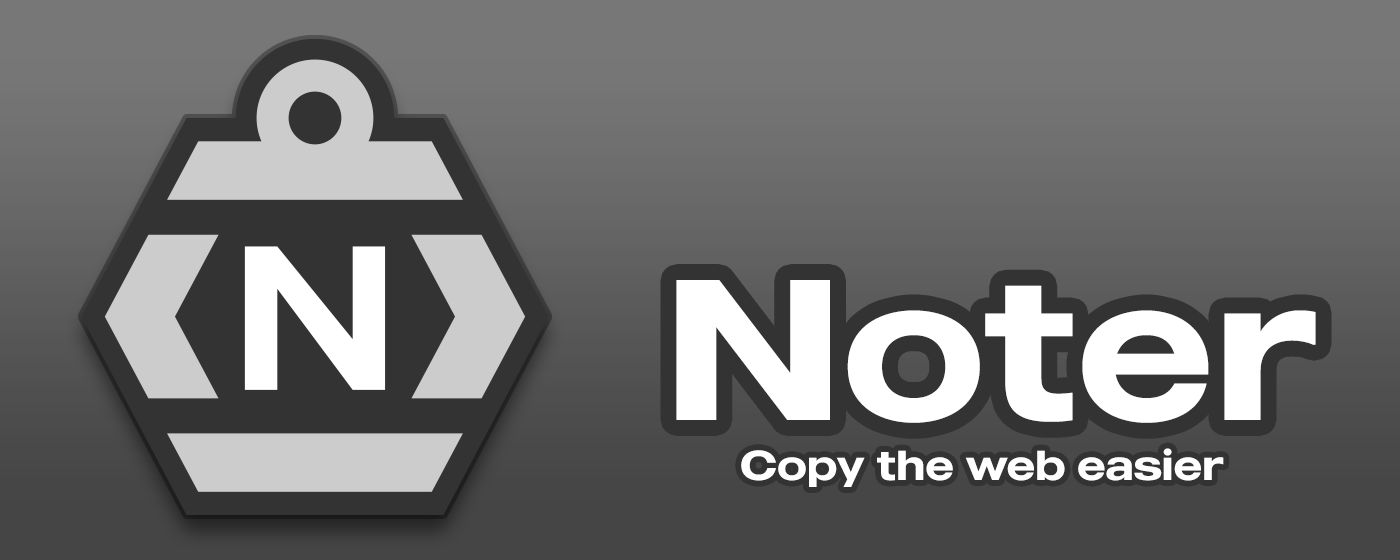
<style>
.page{position:relative;width:1400px;height:560px}
.page>*{position:absolute;margin:0}
.t1{font:200px "MADEOuterSans-Medium";color:#ffffff}
.t2{font:41.7px "MADEOuterSans-Medium";color:#ffffff}
</style>
<div class="page">
<p class="t1" style="left:676px;top:280px;width:640px;height:143px">Noter</p>
<p class="t2" style="left:741px;top:448px;width:483px;height:39px">Copy the web easier</p>
</div>
